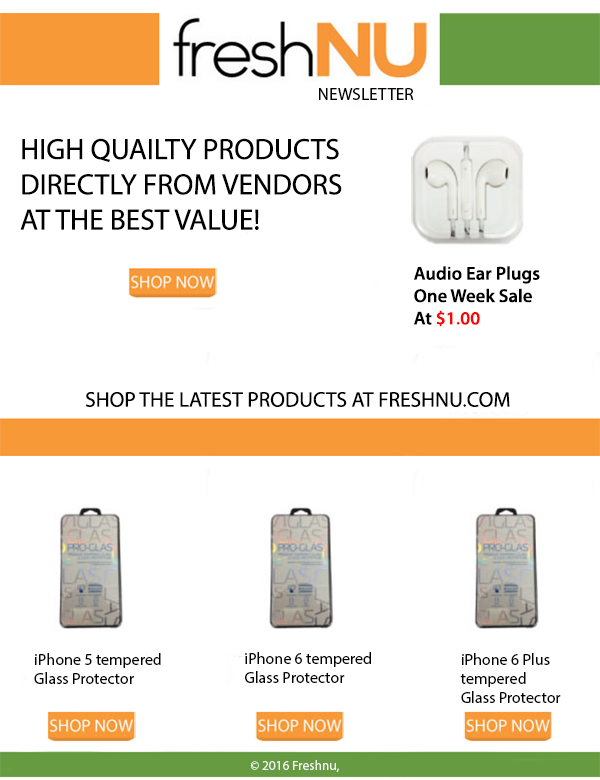
<style>
.page{position:relative;width:600px;height:780px;background:#ffffff}
.page>*{position:absolute;margin:0}
.t1{font:17.4px "MyriadPro-Regular";color:#050505}
.t2{font:29.4px "MyriadPro-Regular";color:#000000}
.t3{font:18.7px "MyriadPro-Semibold";color:#000000}
.t4{font:18.7px "MyriadPro-Semibold";color:#fe0505}
.t5{font:21.4px "MyriadPro-Regular";color:#010101}
.t6{font:16px "MyriadPro-Regular";color:#000000}
.t7{font:13.3px "MyriadPro-Regular";color:#f5f5f5}
</style>
<div class="page">
<p class="t1" style="left:319px;top:88px;width:95px;height:12px">NEWSLETTER</p>
<p class="t2" style="left:20px;top:138px;width:322px;height:92px">HIGH QUAILTY PRODUCTS<br>DIRECTLY FROM VENDORS<br>AT THE BEST VALUE!</p>
<p class="t3" style="left:414px;top:266px;width:126px;height:61px">Audio Ear Plugs<br>One Week Sale<br>At<span class="t4"> $1.00</span></p>
<p class="t5" style="left:86px;top:392px;width:424px;height:15px">SHOP THE LATEST PRODUCTS AT FRESHNU.COM</p>
<p class="t6" style="left:34px;top:653px;width:127px;height:31px">iPhone 5 tempered<br>Glass Protector</p>
<p class="t6" style="left:245px;top:652px;width:126px;height:31px">iPhone 6 tempered<br>Glass Protector</p>
<p class="t6" style="left:460px;top:653px;width:101px;height:50px">iPhone 6 Plus<br>tempered<br>Glass Protector</p>
<p class="t7" style="left:251px;top:760px;width:88px;height:12px">© 2016 Freshnu, Inc.</p>
</div>
